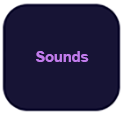
<style>
.page{position:relative;width:124px;height:115px;background:#171435}
.page>*{position:absolute;margin:0}
.t1{font:14.5px "Arial-BoldMT";color:#c17cec}
</style>
<div class="page">
<p class="t1" style="left:36px;top:51px;width:53px;height:11px">Sounds</p>
</div>
